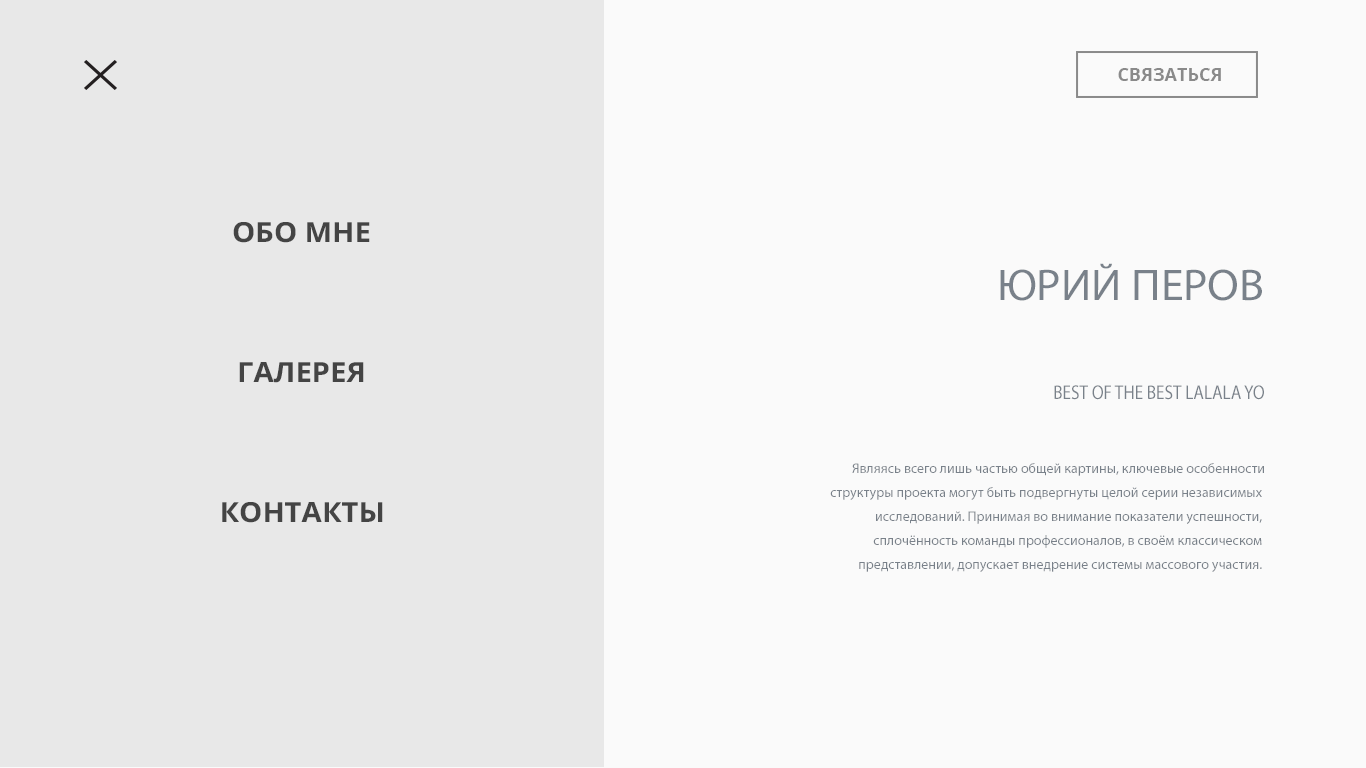
<style>
.page{position:relative;width:1366px;height:768px;background:#fafafa}
.page>*{position:absolute;margin:0}
.t1{font:18px "OpenSans-Bold";color:#8a8a8a;text-transform:uppercase}
.t2{font:27.7px "OpenSans-Bold";color:#444444;text-transform:uppercase;scale:1.06 1}
.t3{font:44.6px "MyriadPro-Regular";color:#79818a;scale:1.03 1}
.t4{font:20px "MyriadPro-Regular";color:#79818a;scale:0.86 1}
.t5{font:14px/24px "MyriadPro-Regular";color:#79818a}
</style>
<div class="page">
<p class="t1" style="left:1118px;top:68px;width:103px;height:13px">СВЯЗАТЬСЯ</p>
<p class="t2" style="left:233px;top:222px;width:137px;height:21px">ОБО МНЕ</p>
<p class="t3" style="left:1000px;top:263px;width:262px;height:38px">ЮРИЙ ПЕРОВ</p>
<p class="t2" style="left:239px;top:362px;width:125px;height:21px">ГАЛЕРЕЯ</p>
<p class="t4" style="left:1054px;top:385px;width:210px;height:15px">BEST OF THE BEST LALALA YO</p>
<p class="t5" style="left:830px;top:463px;width:434px;height:109px;text-align:right">Являясь всего лишь частью общей картины, ключевые особенности<br> структуры проекта могут быть подвергнуты целой серии независимых <br>исследований. Принимая во внимание показатели успешности, <br>сплочённость команды профессионалов, в своём классическом <br> представлении, допускает внедрение системы массового участия.</p>
<p class="t2" style="left:222px;top:502px;width:161px;height:21px">КОНТАКТЫ</p>
</div>
